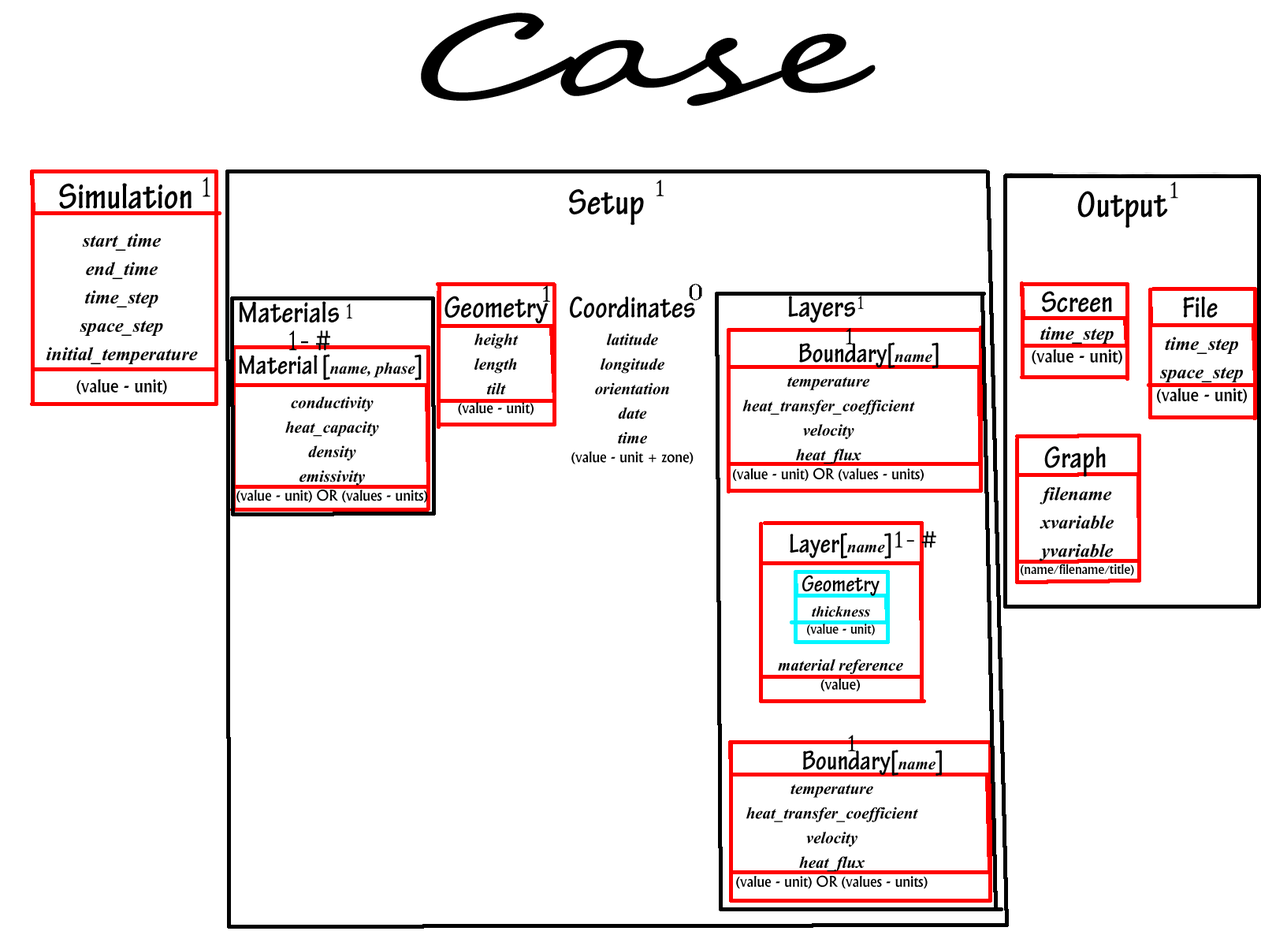
<style>
.page{position:relative;width:1261px;height:946px;background:#ffffff}
.page>*{position:absolute;margin:0}
.t1{font:113.5px "SegoeScript";color:#000000;scale:1.74 1}
.t2{font:119.3px "SegoeScript";color:#000000;scale:1.74 1}
.t3{font:37.8px "TektonPro-BoldCond";color:#000000}
.t4{font:28.4px "MS Serif";color:#000000}
.t5{font:23.6px "MS Serif";color:#000000;scale:1.2 1}
.t6{font:23.6px "Vijaya-Bold";color:#000000}
.t7{font:18.9px "Narkisim";color:#000000}
.t8{font:31.5px "TektonPro-BoldCond";color:#000000}
.t9{font:21.7px "MS Serif";color:#000000}
.t10{font:18.9px "MS Serif";color:#000000;scale:1.09 1}
.t11{font:20.5px "Vijaya-Bold";color:#000000}
.t12{font:15.8px "Narkisim";color:#000000}
.t13{font:28.4px "TektonPro-BoldCond";color:#000000}
.t14{font:14.2px "Narkisim";color:#000000}
.t15{font:23.6px "TektonPro-BoldCond";color:#000000}
.t16{font:18.9px "Vijaya-Bold";color:#000000}
</style>
<div class="page">
<p class="t1" style="left:421px;top:13px;width:455px;height:93px">Case<span class="t2"> -</span></p>
<p class="t3" style="left:59px;top:183px;width:133px;height:26px">Simulation</p>
<p class="t4" style="left:203px;top:177px;width:7px;height:20px">1</p>
<p class="t5" style="left:656px;top:180px;width:8px;height:16px">1</p>
<p class="t5" style="left:1170px;top:181px;width:8px;height:18px">1</p>
<p class="t3" style="left:569px;top:189px;width:75px;height:36px">Setup</p>
<p class="t3" style="left:1077px;top:191px;width:91px;height:37px">Output</p>
<p class="t6" style="left:46px;top:233px;width:152px;height:162px;text-align:center">start_time<br>end_time<br>time_step<br>space_step<br>initial_temperature<br><br><span class="t7">(value - unit)</span></p>
<p class="t5" style="left:543px;top:285px;width:7px;height:17px">1</p>
<p class="t5" style="left:689px;top:284px;width:13px;height:16px">0</p>
<p class="t8" style="left:1042px;top:291px;width:70px;height:21px">Screen</p>
<p class="t8" style="left:239px;top:301px;width:100px;height:22px">Materials</p>
<p class="t9" style="left:347px;top:303px;width:5px;height:15px">1</p>
<p class="t8" style="left:444px;top:296px;width:104px;height:28px">Geometry</p>
<p class="t8" style="left:570px;top:296px;width:125px;height:22px">Coordinates</p>
<p class="t8" style="left:788px;top:296px;width:67px;height:27px">Layers</p>
<p class="t10" style="left:858px;top:296px;width:6px;height:13px">1</p>
<p class="t8" style="left:1183px;top:296px;width:35px;height:22px">File</p>
<p class="t5" style="left:846px;top:328px;width:7px;height:16px">1</p>
<p class="t7" style="left:1032px;top:326px;width:90px;height:39px;text-align:center"><span class="t6">time_step<br></span>(value - unit)</p>
<p class="t4" style="left:289px;top:330px;width:41px;height:21px">1- #</p>
<p class="t11" style="left:458px;top:333px;width:76px;height:82px;text-align:center">height<br>length<br>tilt<br><span class="t12">(value - unit)</span></p>
<p class="t11" style="left:571px;top:333px;width:123px;height:131px;text-align:center">latitude<br>longitude<br>orientation<br>date<br>time<br><span class="t12">(value - unit + zone)</span></p>
<p class="t6" style="left:1157px;top:337px;width:90px;height:66px;text-align:center">time_step<br>space_step<br><span class="t7">(value - unit)</span></p>
<p class="t11" style="left:239px;top:354px;width:183px;height:27px"><span class="t13">Material [</span>name, phase<span class="t13">]</span></p>
<p class="t13" style="left:799px;top:342px;width:140px;height:27px">Boundary[<span class="t11">name</span>]</p>
<p class="t11" style="left:733px;top:377px;width:191px;height:105px;text-align:center">temperature<br>heat_transfer_coefficient<br>velocity<br>heat_flux<br><span class="t12">(value - unit) OR (values - units)</span></p>
<p class="t11" style="left:236px;top:396px;width:192px;height:107px;text-align:center">conductivity<br>heat_capacity<br>density<br>emissivity<br><span class="t12">(value - unit) OR (values - units)</span></p>
<p class="t8" style="left:1044px;top:446px;width:62px;height:31px">Graph</p>
<p class="t6" style="left:1021px;top:487px;width:113px;height:89px;text-align:center">filename<br>xvariable<br>yvariable<br><span class="t14">(name/filename/title)</span></p>
<p class="t13" style="left:790px;top:533px;width:101px;height:26px">Layer[<span class="t11">name</span>]</p>
<p class="t5" style="left:895px;top:531px;width:41px;height:17px">1- #</p>
<p class="t15" style="left:802px;top:575px;width:77px;height:21px">Geometry</p>
<p class="t14" style="left:807px;top:606px;width:68px;height:29px;text-align:center"><span class="t16">thickness<br></span>(value - unit)</p>
<p class="t11" style="left:778px;top:659px;width:125px;height:32px;text-align:center">material reference<br><span class="t12">(value)</span></p>
<p class="t5" style="left:848px;top:734px;width:8px;height:17px">1</p>
<p class="t13" style="left:802px;top:749px;width:140px;height:26px">Boundary[<span class="t11">name</span>]</p>
<p class="t11" style="left:736px;top:784px;width:192px;height:105px;text-align:center">temperature<br>heat_transfer_coefficient<br>velocity<br>heat_flux<br><span class="t12">(value - unit) OR (values - units)</span></p>
</div>
